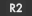
<style>
.page{position:relative;width:32px;height:16px;background:#363636}
.page>*{position:absolute;margin:0}
.t1{font:11px "Futura-Medium";color:#ededed}
</style>
<div class="page">
<p class="t1" style="left:10px;top:3px;width:12px;height:10px">R2</p>
</div>
